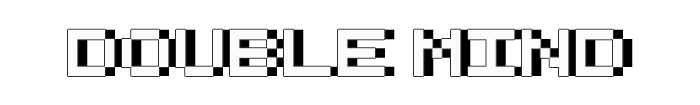
<style>
.page{position:relative;width:700px;height:105px;background:#ffffff}
.page>*{position:absolute;margin:0}
.t1{font:64px "RetroComputer";color:#fcfbfb}
.t2{font:64px "RetroComputer"}
</style>
<div class="page">
<p class="t1" style="left:68px;top:29px;width:555px;height:47px">Double mind</p>
<p class="t2" style="left:78px;top:29px;width:555px;height:47px">Double mind</p>
</div>
